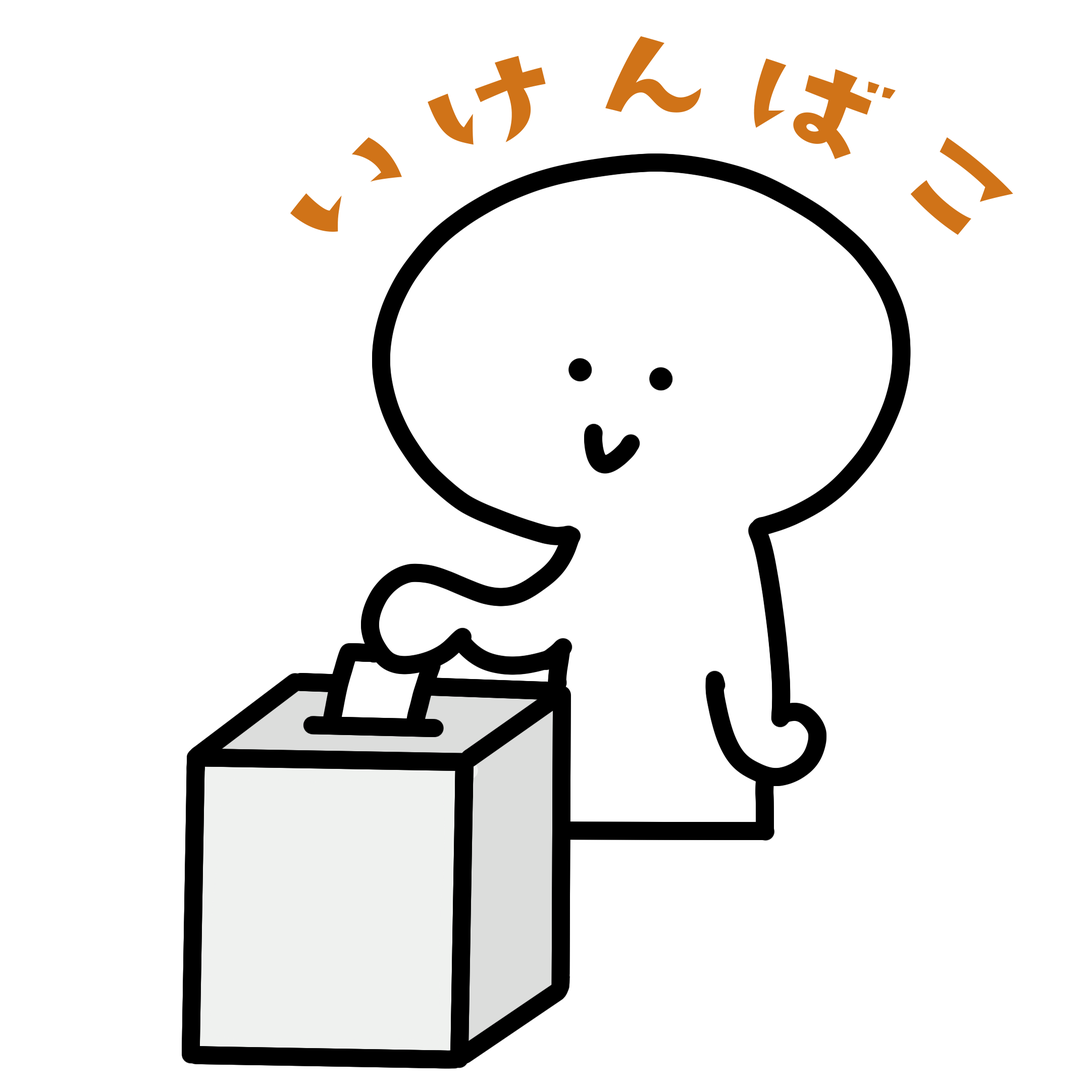
<style>
.page{position:relative;width:1092px;height:1092px;background:#ffffff}
.page>*{position:absolute;margin:0}
.t1{font:126.2px "AB-kirigirisu";color:#d07318}
</style>
<div class="page">
<p class="t1" style="left:290px;top:36px;width:723px;height:199px">いけんばこ</p>
</div>
